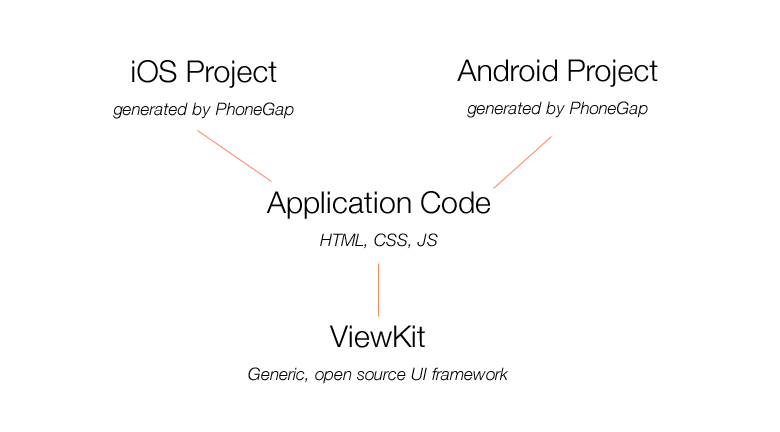
<style>
.page{position:relative;width:780px;height:432px;background:#ffffff}
.page>*{position:absolute;margin:0}
.t1{font:17px/33px "HelveticaNeue-LightItalic";color:#000000}
.t2{font:30px/12px "HelveticaNeue-Light";color:#000000}
</style>
<div class="page">
<p class="t1" style="left:113px;top:60px;width:181px;height:59px;text-align:center"><span class="t2">iOS Project<br></span>generated by PhoneGap</p>
<p class="t1" style="left:457px;top:59px;width:201px;height:59px;text-align:center"><span class="t2">Android Project<br></span>generated by PhoneGap</p>
<p class="t2" style="left:266px;top:191px;width:224px;height:58px;text-align:center">Application Code<br><span class="t1">HTML, CSS, JS</span></p>
<p class="t1" style="left:248px;top:325px;width:261px;height:59px;text-align:center"><span class="t2">ViewKit<br></span>Generic, open source UI framework</p>
</div>
